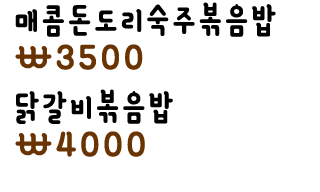
<style>
.page{position:relative;width:320px;height:192px;background:#ffffff}
.page>*{position:absolute;margin:0}
.t1{font:38px "YanoljaYacheB";letter-spacing:0.1em;color:#000000}
.t2{font:43px "YanoljaYacheB";letter-spacing:0.1em;color:#693303}
</style>
<div class="page">
<p class="t1" style="left:15px;top:2px;width:261px;height:35px">매콤돈도리숙주볶음밥</p>
<p class="t2" style="left:15px;top:44px;width:128px;height:26px">\3500</p>
<p class="t1" style="left:16px;top:89px;width:157px;height:35px">닭갈비볶음밥</p>
<p class="t2" style="left:15px;top:131px;width:130px;height:26px">\4000</p>
</div>
